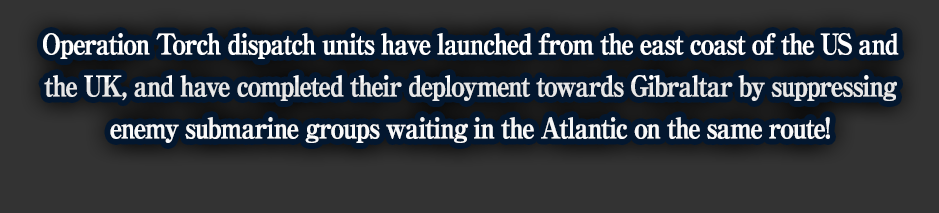
<style>
.page{position:relative;width:939px;height:213px;background:#333333}
.page>*{position:absolute;margin:0}
.t1{font:28px/42px "RyuminPro-ExBold";letter-spacing:-0.08em;color:#ffffff;font-weight:bold;scale:0.9 1}
</style>
<div class="page">
<p class="t1" style="left:43px;top:33px;width:856px;height:110px;text-align:center">Operation Torch dispatch units have launched from the east coast of the US and<br>the UK, and have completed their deployment towards Gibraltar by suppressing<br>enemy submarine groups waiting in the Atlantic on the same route!</p>
</div>
